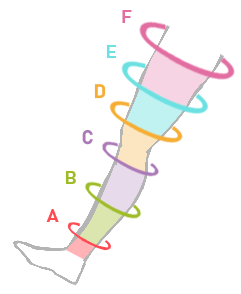
<style>
.page{position:relative;width:241px;height:294px;background:#ffffff}
.page>*{position:absolute;margin:0}
.t1{font:19.4px "Bahnschrift-Bold";color:#e26da1}
.t2{font:19.4px "Bahnschrift-Bold";color:#6de1e2}
.t3{font:19.4px "Bahnschrift-Bold";color:#f5ad34}
.t4{font:19.4px "Bahnschrift-Bold";color:#aa79b6}
.t5{font:19.4px "Bahnschrift-Bold";color:#9dbc26}
.t6{font:19.4px "Bahnschrift-Bold";color:#fe4b53}
</style>
<div class="page">
<p class="t1" style="left:122px;top:10px;width:10px;height:13px">F</p>
<p class="t2" style="left:106px;top:45px;width:11px;height:13px">E</p>
<p class="t3" style="left:94px;top:84px;width:12px;height:15px">D</p>
<p class="t4" style="left:82px;top:129px;width:11px;height:16px">C</p>
<p class="t5" style="left:65px;top:171px;width:11px;height:13px">B</p>
<p class="t6" style="left:46px;top:209px;width:13px;height:13px">A</p>
</div>
